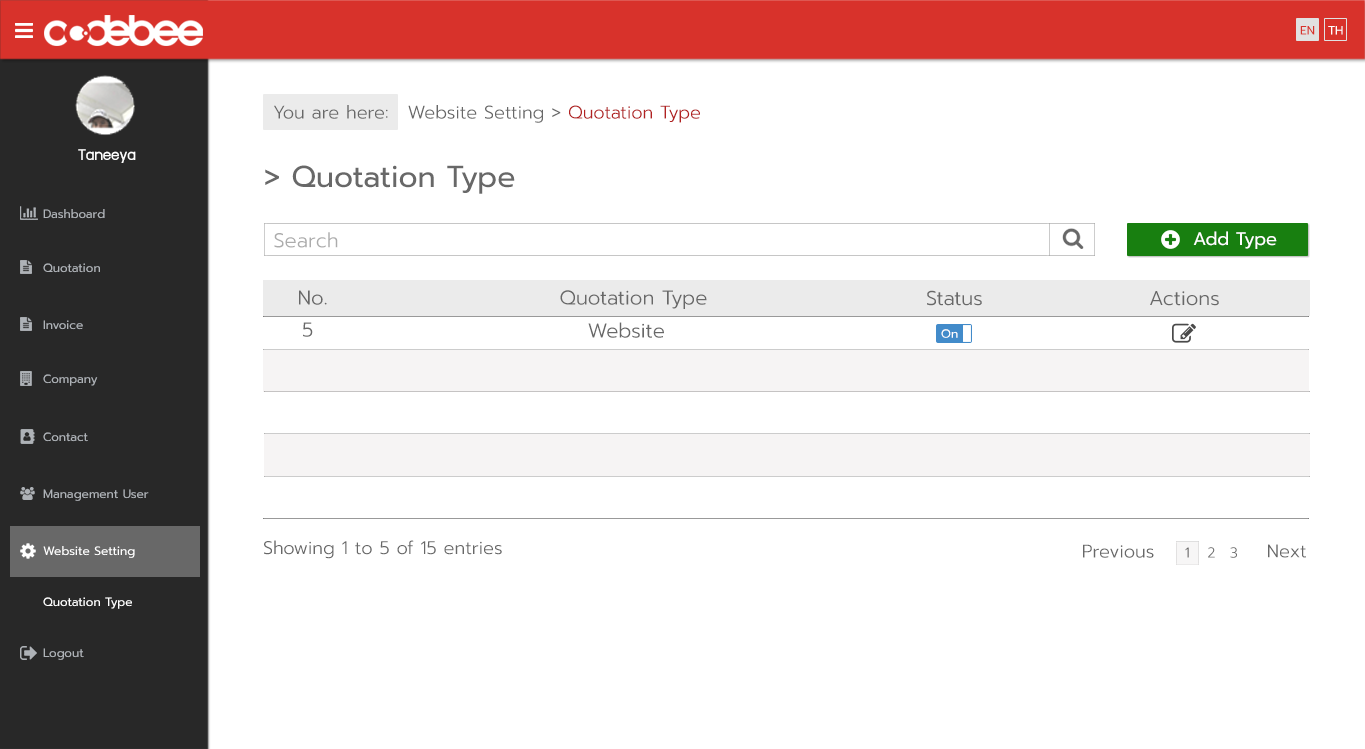
<style>
.page{position:relative;width:1365px;height:749px;background:#ffffff}
.page>*{position:absolute;margin:0}
.t1{font:12px "Prompt-Regular";color:#d8322b}
.t2{font:12px "Prompt-Regular";color:#ffffff}
.t3{font:18px "Prompt-Light";color:#686868}
.t4{font:18px "Prompt-Light";color:#b22121}
.t5{font:18px "supermarket";color:#ffffff}
.t6{font:30px "Prompt-Regular";color:#686868}
.t7{font:12px "Prompt-Regular";color:#aeb2b7}
.t8{font:20px "Prompt-Light";color:#acacac}
.t9{font:18px "Prompt-Regular";color:#ffffff}
.t10{font:20px "Prompt-Light";color:#686868}
.t11{font:14px "Prompt-Light";color:#686868}
</style>
<div class="page">
<p class="t1" style="left:1300px;top:26px;width:15px;height:9px">EN</p>
<p class="t2" style="left:1328px;top:26px;width:15px;height:9px">TH</p>
<p class="t3" style="left:274px;top:105px;width:114px;height:14px">You are here:</p>
<p class="t3" style="left:408px;top:105px;width:292px;height:18px">Website Setting &gt; <span class="t4">Quotation Type</span></p>
<p class="t5" style="left:78px;top:149px;width:58px;height:14px">Taneeya</p>
<p class="t6" style="left:265px;top:165px;width:250px;height:29px">&gt; Quotation Type</p>
<p class="t7" style="left:43px;top:209px;width:62px;height:10px">Dashboard</p>
<p class="t8" style="left:274px;top:232px;width:64px;height:16px">Search</p>
<p class="t9" style="left:1193px;top:231px;width:84px;height:18px">Add Type</p>
<p class="t7" style="left:43px;top:263px;width:57px;height:10px">Quotation</p>
<p class="t10" style="left:299px;top:290px;width:28px;height:15px">No.</p>
<p class="t10" style="left:560px;top:290px;width:147px;height:19px">Quotation Type</p>
<p class="t10" style="left:927px;top:290px;width:55px;height:16px">Status</p>
<p class="t10" style="left:1150px;top:291px;width:69px;height:15px">Actions</p>
<p class="t7" style="left:43px;top:320px;width:40px;height:10px">Invoice</p>
<p class="t10" style="left:303px;top:322px;width:10px;height:15px">5</p>
<p class="t10" style="left:588px;top:322px;width:76px;height:16px">Website</p>
<p class="t2" style="left:941px;top:329px;width:17px;height:9px">On</p>
<p class="t7" style="left:43px;top:374px;width:55px;height:12px">Company</p>
<p class="t7" style="left:43px;top:432px;width:45px;height:10px">Contact</p>
<p class="t7" style="left:43px;top:489px;width:106px;height:12px">Management User</p>
<p class="t3" style="left:264px;top:540px;width:238px;height:19px">Showing 1 to 5 of 15 entries</p>
<p class="t3" style="left:1083px;top:544px;width:71px;height:14px">Previous</p>
<p class="t3" style="left:1268px;top:544px;width:38px;height:14px">Next</p>
<p class="t2" style="left:43px;top:546px;width:92px;height:12px">Website Setting</p>
<p class="t11" style="left:1185px;top:547px;width:4px;height:11px">1</p>
<p class="t11" style="left:1208px;top:547px;width:7px;height:11px">2</p>
<p class="t11" style="left:1230px;top:547px;width:7px;height:11px">3</p>
<p class="t2" style="left:43px;top:597px;width:89px;height:12px">Quotation Type</p>
<p class="t7" style="left:43px;top:648px;width:41px;height:12px">Logout</p>
</div>
